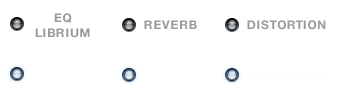
<style>
.page{position:relative;width:342px;height:100px;background:#ffffff}
.page>*{position:absolute;margin:0}
.t1{font:12px "HelveticaNeue-Bold";letter-spacing:0.05em;color:#9b9b9b;text-transform:uppercase}
</style>
<div class="page">
<p class="t1" style="left:35px;top:13px;width:55px;height:25px;text-align:center">EQ<br>LIBRIUM</p>
<p class="t1" style="left:144px;top:20px;width:53px;height:9px">Reverb</p>
<p class="t1" style="left:247px;top:20px;width:79px;height:10px">Distortion</p>
</div>
